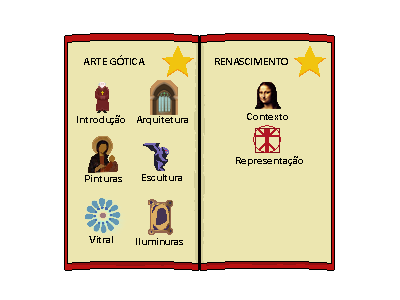
<style>
.page{position:relative;width:400px;height:300px;background:#ffffff}
.page>*{position:absolute;margin:0}
.t1{font:11px "Calibri-Bold";color:#010101}
.t2{font:11px "Calibri-Bold";color:#000000}
</style>
<div class="page">
<p class="t1" style="left:84px;top:55px;width:61px;height:10px">ARTE GÓTICA</p>
<p class="t1" style="left:215px;top:58px;width:73px;height:7px">RENASCIMENTO</p>
<p class="t2" style="left:247px;top:113px;width:41px;height:7px">Contexto</p>
<p class="t1" style="left:77px;top:115px;width:48px;height:10px">Introdução</p>
<p class="t1" style="left:137px;top:116px;width:51px;height:9px">Arquitetura</p>
<p class="t2" style="left:236px;top:156px;width:67px;height:10px">Representação</p>
<p class="t1" style="left:142px;top:174px;width:40px;height:7px">Escultura</p>
<p class="t1" style="left:85px;top:175px;width:37px;height:7px">Pinturas</p>
<p class="t2" style="left:89px;top:236px;width:24px;height:7px">Vitral</p>
<p class="t2" style="left:136px;top:238px;width:47px;height:7px">Iluminuras</p>
</div>
